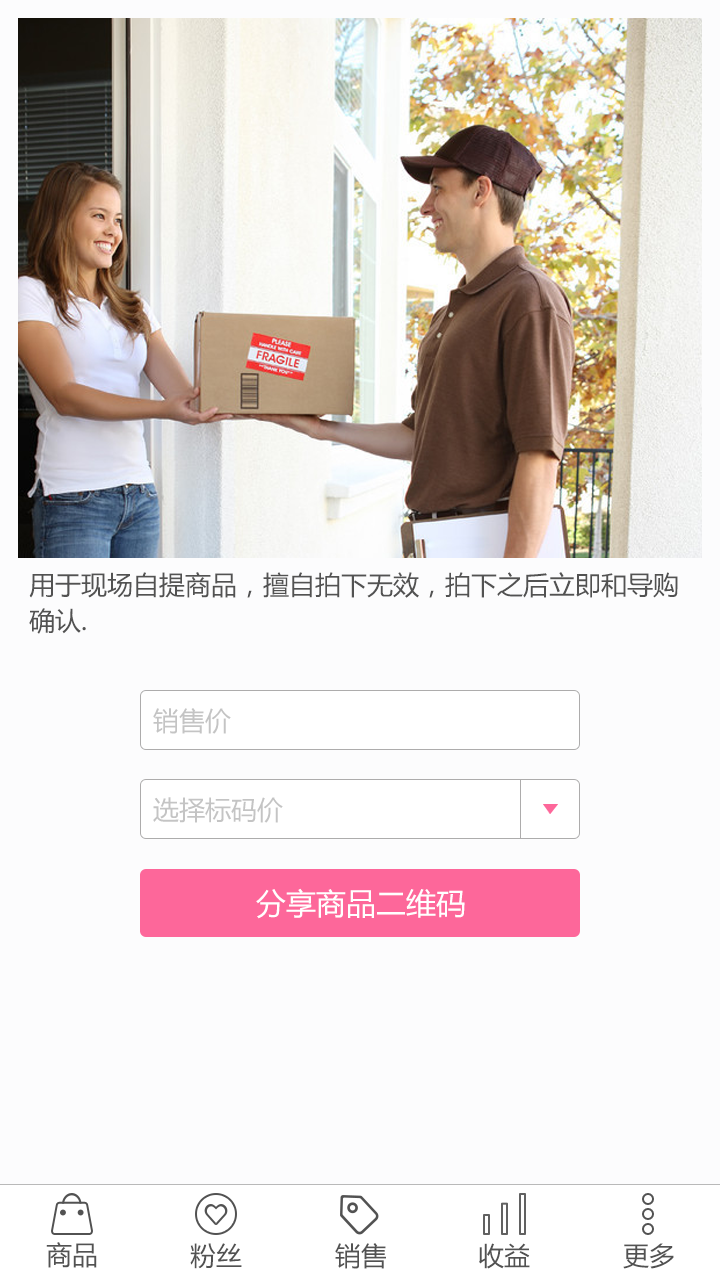
<style>
.page{position:relative;width:720px;height:1280px;background:#fcfcfd}
.page>*{position:absolute;margin:0}
.t1{font:26px/36px "MicrosoftYaHei";color:#525252}
.t2{font:26px "MicrosoftYaHei";color:#c4c4c4}
.t3{font:30px "MicrosoftYaHei";color:#ffffff}
.t4{font:26px "MicrosoftYaHei";color:#525252}
</style>
<div class="page">
<p class="t1" style="left:29px;top:572px;width:649px;height:62px">用于现场自提商品，擅自拍下无效，拍下之后立即和导购<br>确认.</p>
<p class="t2" style="left:153px;top:708px;width:78px;height:26px">销售价</p>
<p class="t2" style="left:153px;top:797px;width:130px;height:26px">选择标码价</p>
<p class="t3" style="left:256px;top:888px;width:209px;height:31px">分享商品二维码</p>
<p class="t4" style="left:46px;top:1242px;width:51px;height:26px">商品</p>
<p class="t4" style="left:190px;top:1243px;width:52px;height:26px">粉丝</p>
<p class="t4" style="left:335px;top:1243px;width:51px;height:26px">销售</p>
<p class="t4" style="left:479px;top:1243px;width:51px;height:26px">收益</p>
<p class="t4" style="left:623px;top:1243px;width:51px;height:26px">更多</p>
</div>
